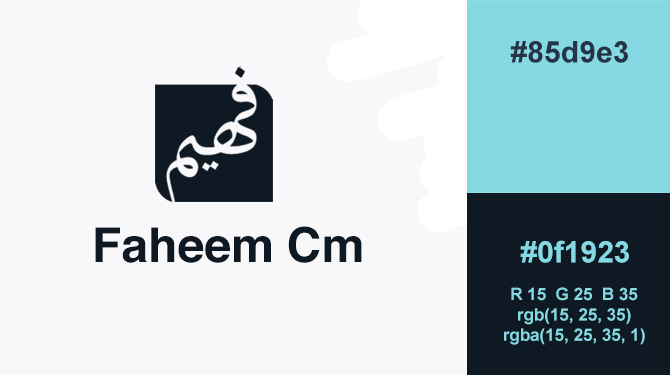
<style>
.page{position:relative;width:670px;height:375px;background:#f8f8fa}
.page>*{position:absolute;margin:0}
.t1{font:30px "Arial-BoldMT";color:#273445}
.t2{font:48px "Helvetica-Bold";color:#0f1923}
.t3{font:30px "Arial-BoldMT";color:#85d9e3}
.t4{font:17px "Arial-BoldMT";color:#85d9e3}
</style>
<div class="page">
<p class="t1" style="left:510px;top:41px;width:118px;height:22px">#85d9e3</p>
<p class="t2" style="left:95px;top:226px;width:267px;height:37px">Faheem Cm</p>
<p class="t3" style="left:520px;top:240px;width:109px;height:23px">#0f1923</p>
<p class="t4" style="left:504px;top:287px;width:141px;height:58px;text-align:center">R 15  G 25  B 35<br>rgb(15, 25, 35)<br>rgba(15, 25, 35, 1)</p>
</div>
